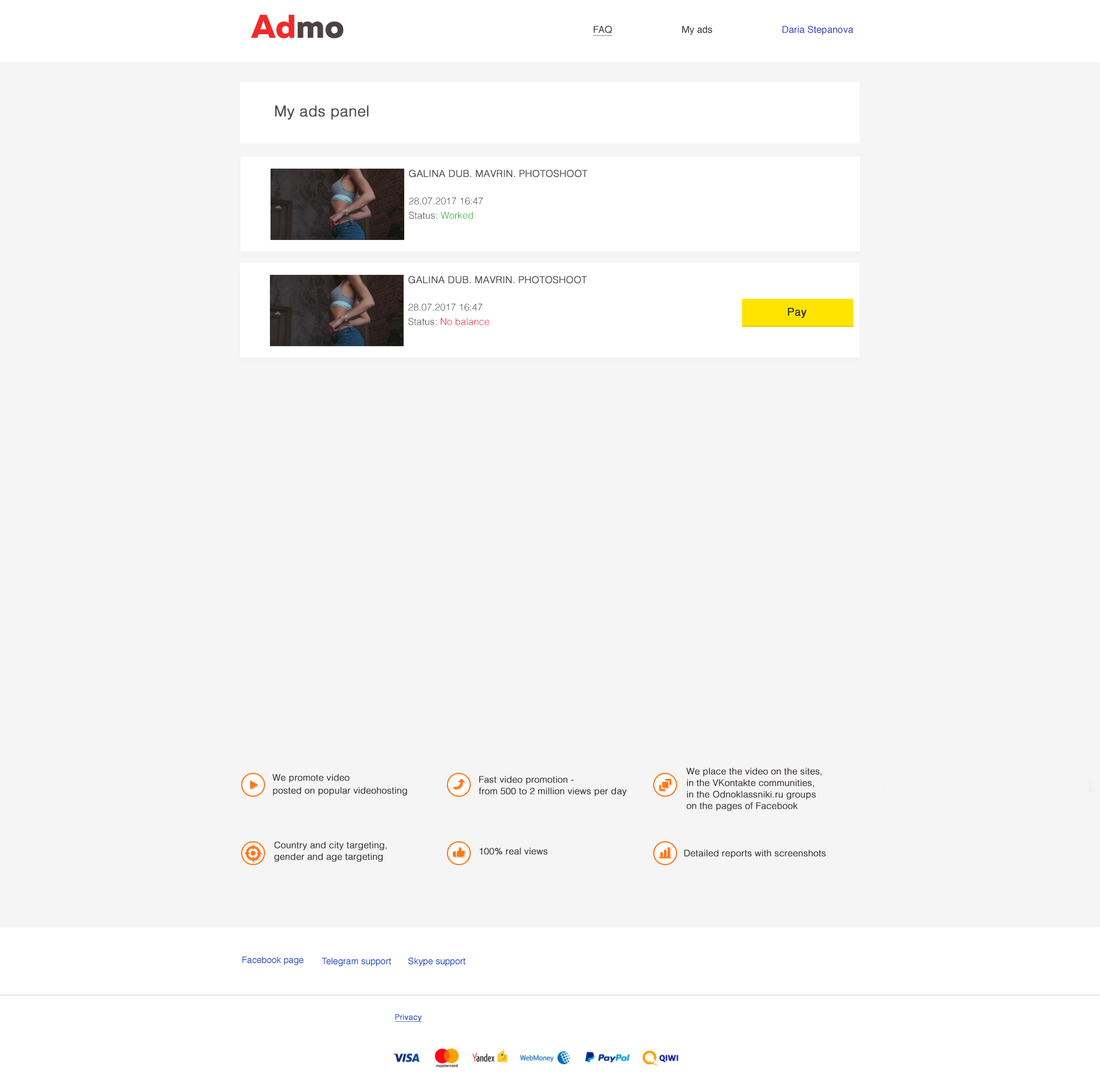
<style>
.page{position:relative;width:1100px;height:1086px;background:#f5f5f5}
.page>*{position:absolute;margin:0}
.t1{font:33px "MullerExtraBold";color:#f02a2a}
.t2{font:33px "MullerExtraBold";color:#4d4242}
.t3{font:9.6px "Helvetica";color:#3444ba}
.t4{font:9.6px "Helvetica";color:#302a2a;text-decoration:underline}
.t5{font:9.6px "Helvetica";color:#302a2a}
.t6{font:15px "Helvetica-Light";color:#4d4d4d;font-weight:bold}
.t7{font:9.6px "Helvetica-Light";color:#4d4d4d;font-weight:bold}
.t8{font:9.6px/1.4px "Helvetica-Light";color:#4d4d4d}
.t9{font:9.6px/1.4px "Helvetica-Light";color:#17b01e}
.t10{font:9.6px/1.4px "Helvetica-Light";color:#e7193b}
.t11{font:10.8px "Helvetica";color:#2a2424;font-weight:bold}
.t12{font:9px/1.4px "Helvetica-Light";color:#3e3535;font-weight:bold}
.t13{font:9px "Helvetica-Light";color:#3e3535;font-weight:bold}
.t14{font:9px "Helvetica";color:#1e46c6}
.t15{font:7.8px "Helvetica-Light";color:#1e46c6;font-weight:bold;text-decoration:underline}
</style>
<div class="page">
<p class="t1" style="left:251px;top:14px;width:93px;height:24px">Ad<span class="t2">mo</span></p>
<p class="t3" style="left:593px;top:26px;width:261px;height:10px"><span class="t4">FAQ</span><span class="t5">                          My ads                          </span>Daria Stepanova</p>
<p class="t6" style="left:275px;top:105px;width:94px;height:15px">My ads panel</p>
<p class="t7" style="left:409px;top:170px;width:179px;height:8px">GALINA DUB. MAVRIN. PHOTOSHOOT</p>
<p class="t8" style="left:409px;top:197px;width:74px;height:22px">28.07.2017 16:47<br><br><br><br><br><br><br><br><br><br>Status: <span class="t9">Worked</span></p>
<p class="t7" style="left:409px;top:276px;width:178px;height:8px">GALINA DUB. MAVRIN. PHOTOSHOOT</p>
<p class="t8" style="left:409px;top:304px;width:81px;height:21px">28.07.2017 16:47<br><br><br><br><br><br><br><br><br><br>Status: <span class="t10">No balance</span></p>
<p class="t11" style="left:788px;top:308px;width:19px;height:10px">Pay</p>
<p class="t12" style="left:272px;top:774px;width:135px;height:22px">We promote video <br><br><br><br><br><br><br><br><br>posted on popular videohosting</p>
<p class="t12" style="left:686px;top:767px;width:136px;height:44px">We place the video on the sites, <br><br><br><br><br><br><br><br>in the VKontakte communities, <br><br><br><br><br><br><br><br>in the Odnoklassniki.ru groups <br><br><br><br><br><br><br><br>on the pages of Facebook</p>
<p class="t12" style="left:479px;top:776px;width:148px;height:20px">Fast video promotion - <br><br><br><br><br><br><br><br>from 500 to 2 million views per day</p>
<p class="t12" style="left:274px;top:841px;width:113px;height:21px">Country and city targeting, <br><br><br><br><br><br><br><br>gender and age targeting</p>
<p class="t13" style="left:479px;top:848px;width:69px;height:7px">100% real views</p>
<p class="t13" style="left:685px;top:850px;width:141px;height:9px">Detailed reports with screenshots</p>
<p class="t14" style="left:242px;top:956px;width:62px;height:9px">Facebook page</p>
<p class="t14" style="left:322px;top:958px;width:69px;height:9px">Telegram support</p>
<p class="t14" style="left:408px;top:958px;width:58px;height:9px">Skype support</p>
<p class="t15" style="left:395px;top:1014px;width:27px;height:8px">Privacy</p>
</div>
